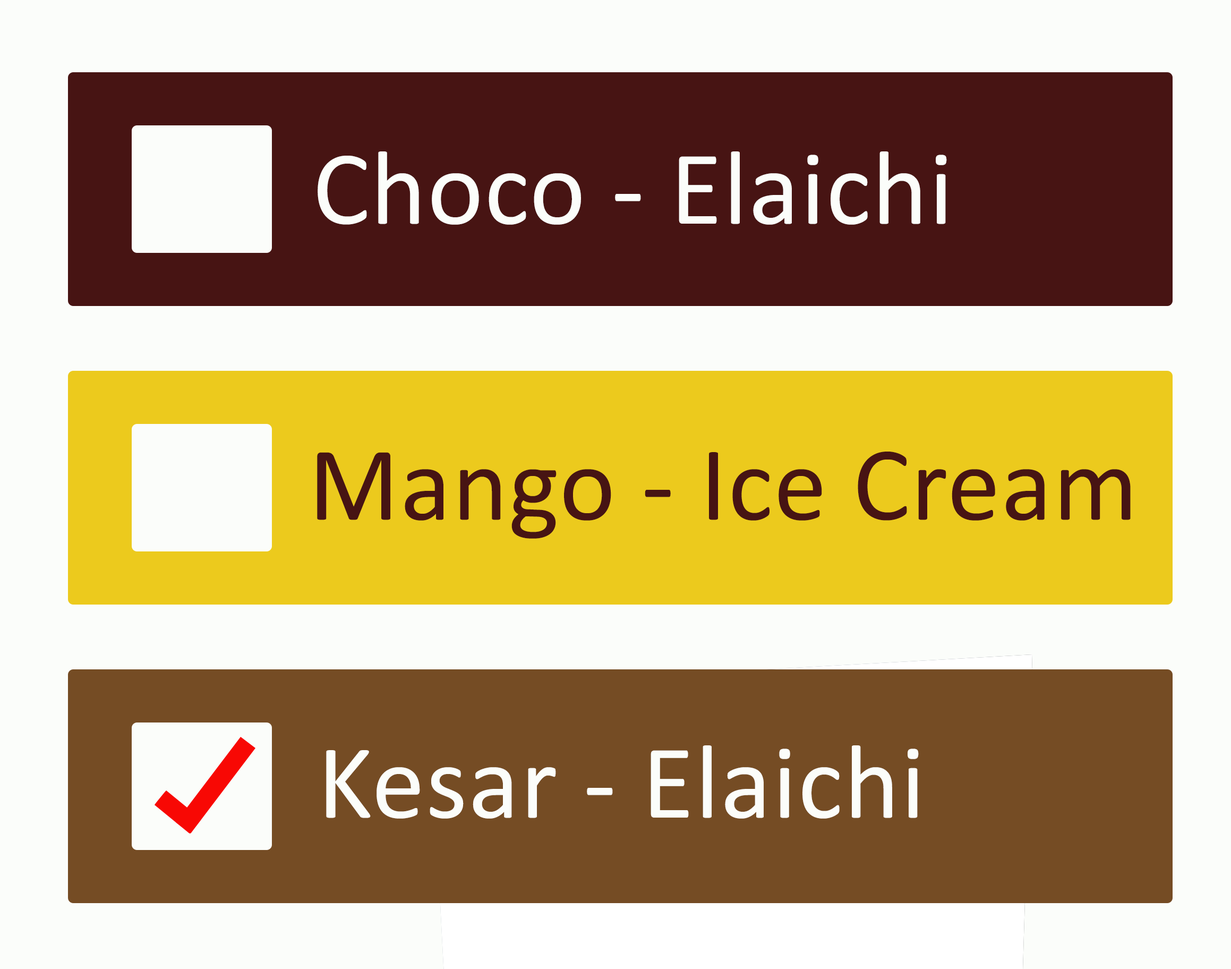
<style>
.page{position:relative;width:1231px;height:969px;background:#fbfdfa}
.page>*{position:absolute;margin:0}
.t1{font:106.2px "Calibri";letter-spacing:0.01em;color:#fbfdfa}
.t2{font:106.2px "Calibri";letter-spacing:0.01em;color:#471413}
</style>
<div class="page">
<p class="t1" style="left:318px;top:151px;width:629px;height:74px">Choco - Elaichi</p>
<p class="t2" style="left:317px;top:451px;width:814px;height:88px">Mango - Ice Cream</p>
<p class="t1" style="left:326px;top:745px;width:593px;height:73px">Kesar - Elaichi</p>
</div>
